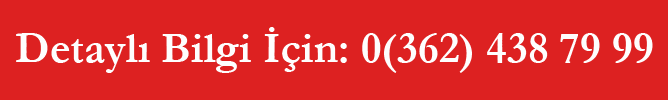
<style>
.page{position:relative;width:668px;height:100px;background:#dd2121}
.page>*{position:absolute;margin:0}
.t1{font:44.3px "Garamond-Bold";color:#fefefe}
</style>
<div class="page">
<p class="t1" style="left:16px;top:27px;width:637px;height:46px">Detaylı Bilgi İçin: 0(362) 438 79 99</p>
</div>
